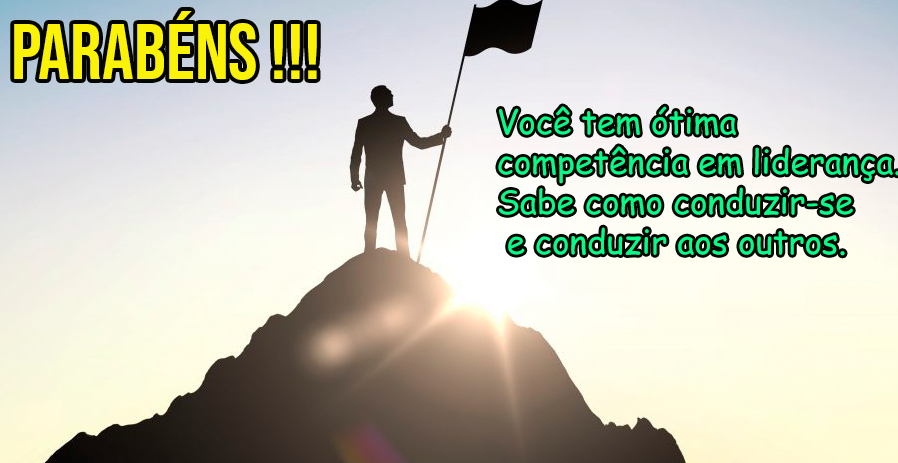
<style>
.page{position:relative;width:898px;height:463px}
.page>*{position:absolute;margin:0}
.t1{font:79.2px "BebasNeue-Regular";color:#fbf20a}
.t2{font:33.3px "ComicSansMS";color:#06fc89}
</style>
<div class="page">
<p class="t1" style="left:14px;top:11px;width:303px;height:69px">Parabéns !!!</p>
<p class="t2" style="left:498px;top:106px;width:402px;height:150px">Você tem ótima <br>competência em liderança. <br>Sabe como conduzir-se<br> e conduzir aos outros.</p>
</div>
